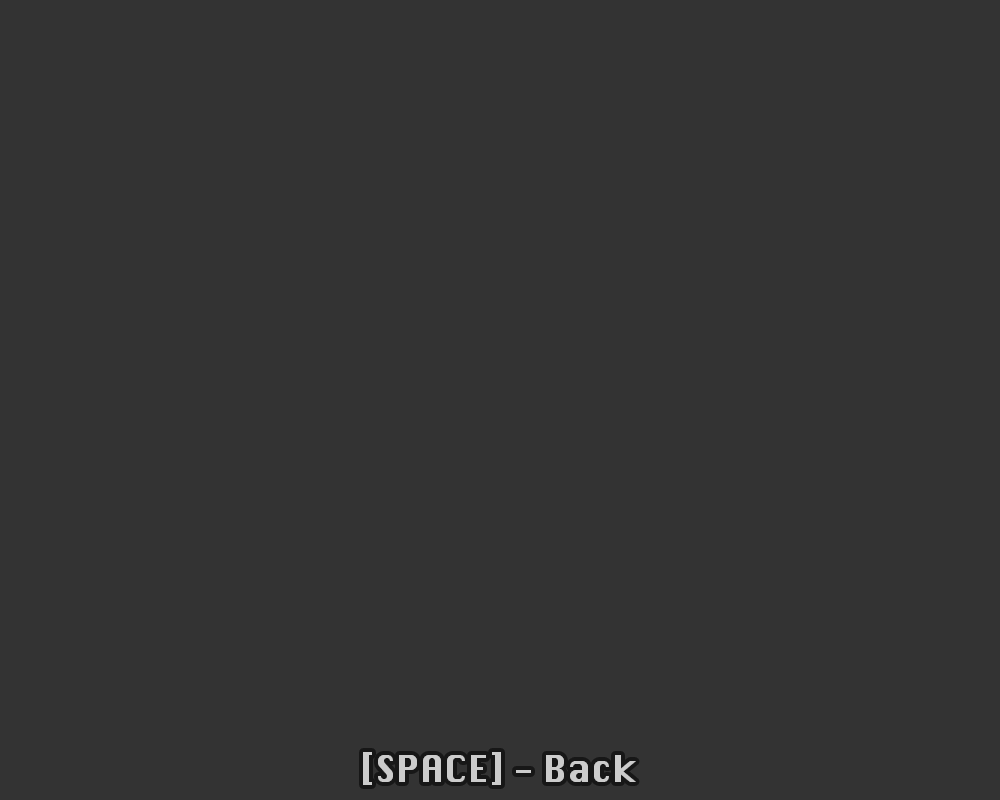
<style>
.page{position:relative;width:1000px;height:800px;background:#333333}
.page>*{position:absolute;margin:0}
.t1{font:36px "Silom";color:#cccccc}
</style>
<div class="page">
<p class="t1" style="left:363px;top:752px;width:273px;height:33px">[SPACE] - Back</p>
</div>
